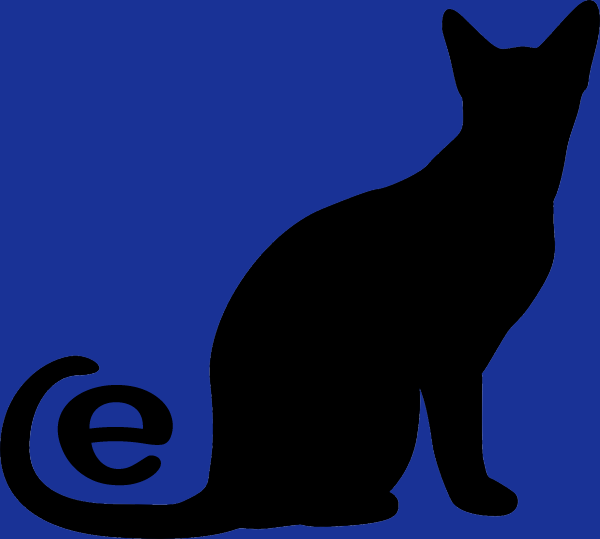
<style>
.page{position:relative;width:600px;height:539px;background:#193296}
.page>*{position:absolute;margin:0}
.t1{font:185px "ArialRoundedMTBold";color:#000000;scale:0.6 1}
</style>
<div class="page">
<p class="t1" style="left:57px;top:385px;width:116px;height:101px">e</p>
</div>
